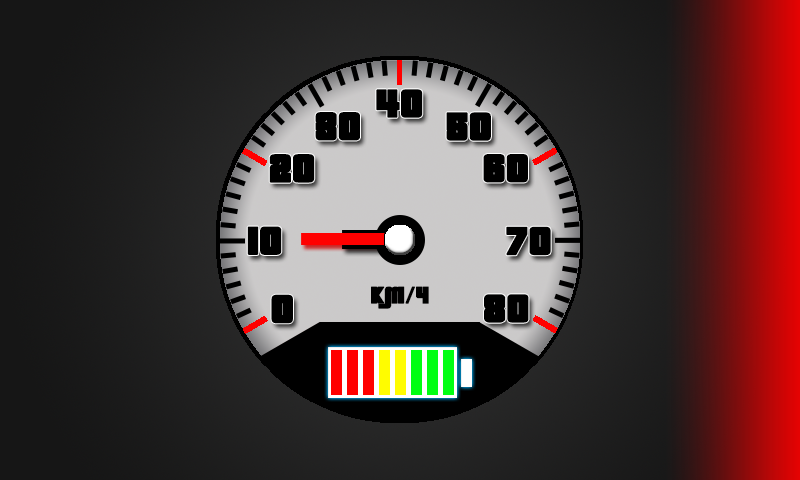
<style>
.page{position:relative;width:800px;height:480px}
.page>*{position:absolute;margin:0}
.t1{font:52.9px "PricedownRus";color:#000000;font-weight:bold}
.t2{font:31.8px "PricedownRus";color:#000000;font-weight:bold}
</style>
<div class="page">
<p class="t1" style="left:376px;top:89px;width:47px;height:29px">40</p>
<p class="t1" style="left:315px;top:112px;width:45px;height:29px">30</p>
<p class="t1" style="left:446px;top:112px;width:45px;height:29px">50</p>
<p class="t1" style="left:269px;top:154px;width:46px;height:29px">20</p>
<p class="t1" style="left:483px;top:154px;width:45px;height:29px">60</p>
<p class="t1" style="left:247px;top:226px;width:35px;height:29px">10</p>
<p class="t1" style="left:506px;top:226px;width:45px;height:30px">70</p>
<p class="t2" style="left:371px;top:286px;width:58px;height:23px">КМ/ч</p>
<p class="t1" style="left:484px;top:294px;width:45px;height:29px">80</p>
</div>
